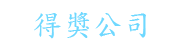
<style>
.page{position:relative;width:180px;height:50px;background:#ffffff}
.page>*{position:absolute;margin:0}
.t1{font:30px "DFKaiShu-SB-Estd-BF";color:#6fd8ff}
</style>
<div class="page">
<p class="t1" style="left:34px;top:12px;width:112px;height:27px">得獎公司</p>
</div>
